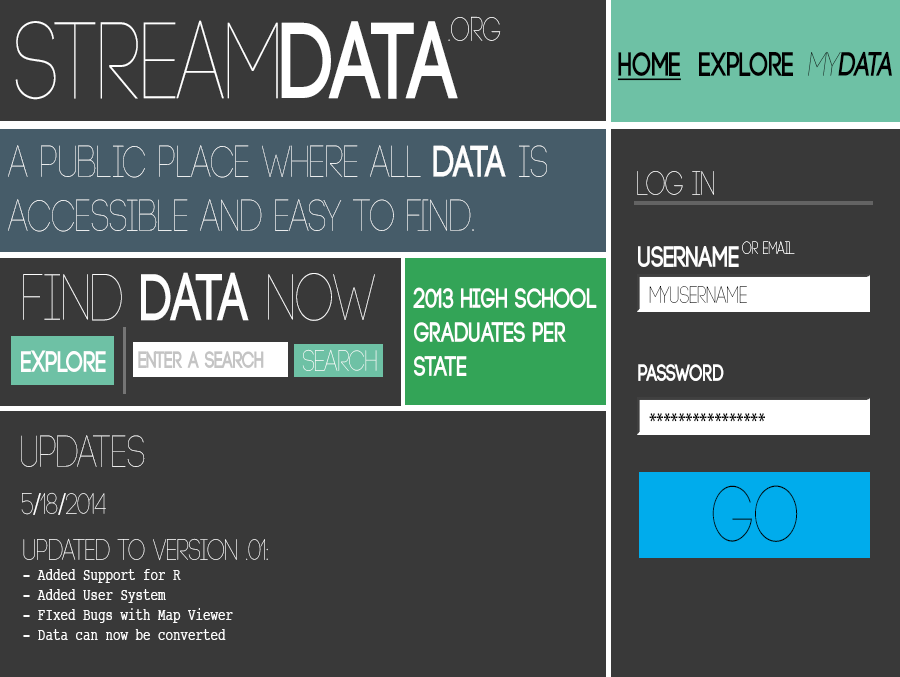
<style>
.page{position:relative;width:900px;height:677px;background:#393939}
.page>*{position:absolute;margin:0}
.t1{font:33.4px "Code-Light";color:#ffffff;scale:0.75 1}
.t2{font:108.3px "Code-Light";color:#ffffff;scale:0.75 1}
.t3{font:108.3px "Code-Bold";color:#ffffff;scale:0.75 1}
.t4{font:33.4px "Code-Bold";color:#000000;scale:0.75 1}
.t5{font:33.4px "Code-Bold";color:#000000;text-decoration:underline;scale:0.75 1}
.t6{font:33.4px "Code-Light";color:#000000;font-style:italic;scale:0.75 1}
.t7{font:33.4px "Code-Bold";color:#000000;font-style:italic;scale:0.75 1}
.t8{font:45px "Code-Light";color:#fefefe;scale:0.75 1}
.t9{font:45px "Code-Bold";color:#fefefe;scale:0.75 1}
.t10{font:30px "Code-Bold";color:#fefefe;scale:0.75 1}
.t11{font:16.7px "Code-Light";color:#fefefe;scale:0.75 1}
.t12{font:66.7px "Code-Light";color:#fefefe;scale:0.75 1}
.t13{font:66.7px "Code-Bold";color:#fefefe;scale:0.75 1}
.t14{font:28.3px "Code-Bold";color:#ffffff;scale:0.75 1}
.t15{font:23.3px "Code-Light";color:#000000;scale:0.75 1}
.t16{font:23.3px "Code-Bold";color:#c4c4c4;scale:0.75 1}
.t17{font:30px "Code-Light";color:#fefefe;scale:0.75 1}
.t18{font:23.3px "Code-Bold";color:#ffffff;scale:0.75 1}
.t19{font:23.3px "MyriadPro-Regular";color:#000000;scale:0.75 1}
.t20{font:78.3px "Code-Light";color:#000000;scale:0.75 1}
.t21{font:30px "MyriadPro-Regular";color:#fefefe;scale:0.75 1}
.t22{font:16.7px "Courier";color:#fefefe;scale:0.75 1}
</style>
<div class="page">
<p class="t1" style="left:448px;top:16px;width:53px;height:25px">.org</p>
<p class="t2" style="left:15px;top:20px;width:443px;height:80px">Stream<span class="t3">DATA</span></p>
<p class="t4" style="left:617px;top:51px;width:275px;height:30px"><span class="t5">HOME</span> EXPLORE <span class="t6">My</span><span class="t7">Data</span></p>
<p class="t8" style="left:8px;top:145px;width:539px;height:87px">A public place where all <span class="t9">data</span> is <br>accessible and easy to find.</p>
<p class="t1" style="left:637px;top:171px;width:77px;height:24px">LOG IN</p>
<p class="t10" style="left:638px;top:246px;width:101px;height:21px">USERNAME</p>
<p class="t11" style="left:742px;top:241px;width:53px;height:13px">or email</p>
<p class="t12" style="left:23px;top:272px;width:352px;height:49px">Find <span class="t13">Data</span> Now</p>
<p class="t14" style="left:413px;top:287px;width:184px;height:89px">2013 High School<br>Graduates per <br>State</p>
<p class="t15" style="left:649px;top:286px;width:98px;height:17px">myusername</p>
<p class="t10" style="left:21px;top:350px;width:85px;height:22px">EXPLORE</p>
<p class="t16" style="left:138px;top:351px;width:126px;height:17px">Enter a Search Term</p>
<p class="t17" style="left:302px;top:349px;width:75px;height:22px">Search</p>
<p class="t18" style="left:638px;top:364px;width:86px;height:17px">Password</p>
<p class="t19" style="left:649px;top:413px;width:116px;height:9px">****************</p>
<p class="t8" style="left:21px;top:435px;width:124px;height:32px">UPDATES</p>
<p class="t20" style="left:712px;top:485px;width:86px;height:57px">GO</p>
<p class="t17" style="left:21px;top:492px;width:85px;height:23px">5<span class="t21">/</span>18<span class="t21">/</span>2014</p>
<p class="t22" style="left:23px;top:538px;width:245px;height:102px"><span class="t17">Updated to version .01:<br></span>- Added Support for R<br>- Added User System<br>- FIxed Bugs with Map Viewer<br>- Data can now be converted</p>
</div>
